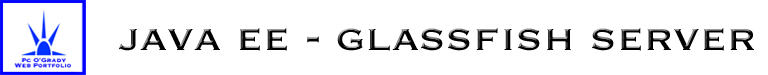
<style>
.page{position:relative;width:768px;height:75px;background:#ffffff}
.page>*{position:absolute;margin:0}
.t1{font:48px "Copperplate"}
</style>
<div class="page">
<p class="t1" style="left:118px;top:28px;width:636px;height:23px">java ee - glassfish server</p>
</div>
